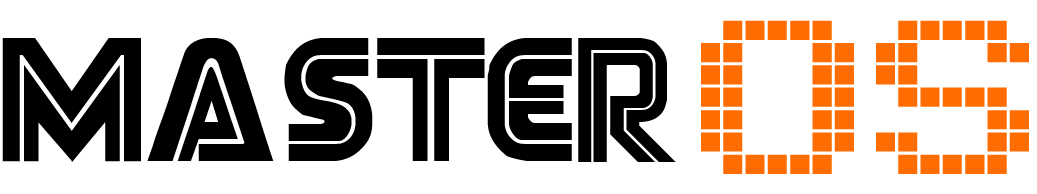
<style>
.page{position:relative;width:1037px;height:194px;background:#ffffff}
.page>*{position:absolute;margin:0}
.t1{font:337.5px "Arcade";color:#ff6d02}
.t2{font:125px "Techtonic";color:#000000}
</style>
<div class="page">
<p class="t1" style="left:701px;top:20px;width:328px;height:154px">OS</p>
<p class="t2" style="left:2px;top:38px;width:674px;height:124px">MASTER</p>
</div>
